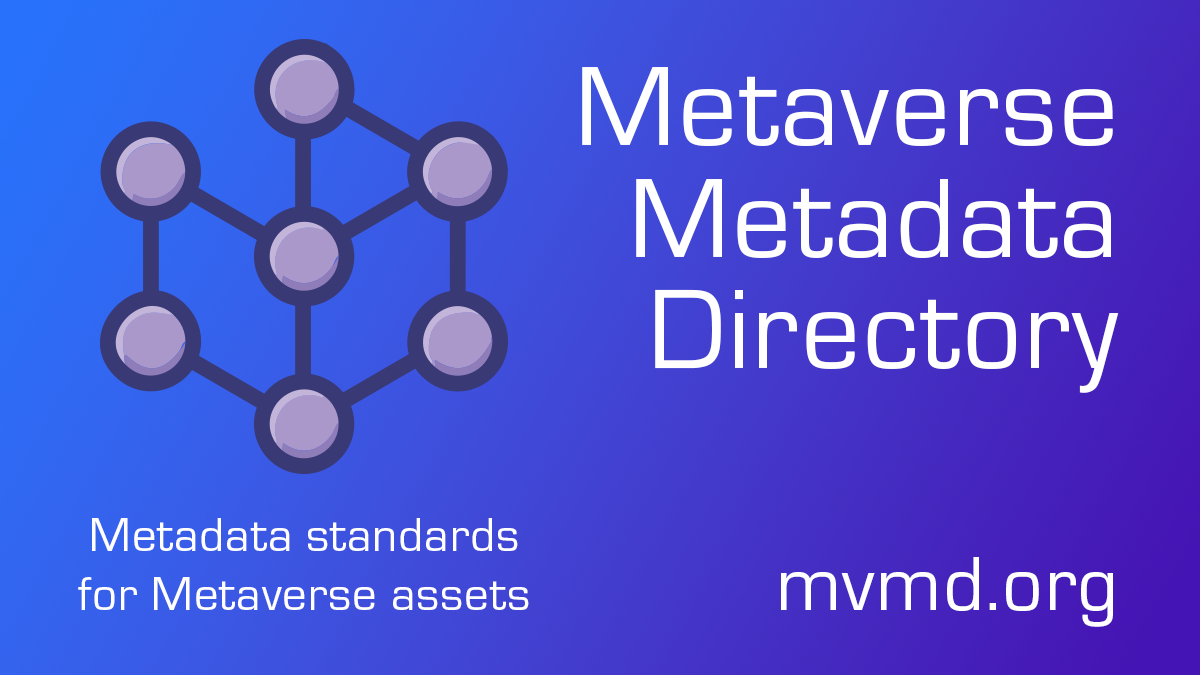
<style>
.page{position:relative;width:1200px;height:675px}
.page>*{position:absolute;margin:0}
.t1{font:117.6px/111.4px "Eurostile-Reg";letter-spacing:0.02em;color:#ffffff}
.t2{font:48.9px "Eurostile-Reg";letter-spacing:0.02em;color:#ffffff}
.t3{font:80px "Eurostile-Reg";letter-spacing:0.02em;color:#ffffff}
</style>
<div class="page">
<p class="t1" style="left:582px;top:67px;width:537px;height:326px;text-align:right">Metaverse<br>Metadata<br>Directory</p>
<p class="t2" style="left:78px;top:518px;width:451px;height:92px;text-align:center">Metadata standards for Metaverse assets</p>
<p class="t3" style="left:781px;top:557px;width:332px;height:70px">mvmd.org</p>
</div>
